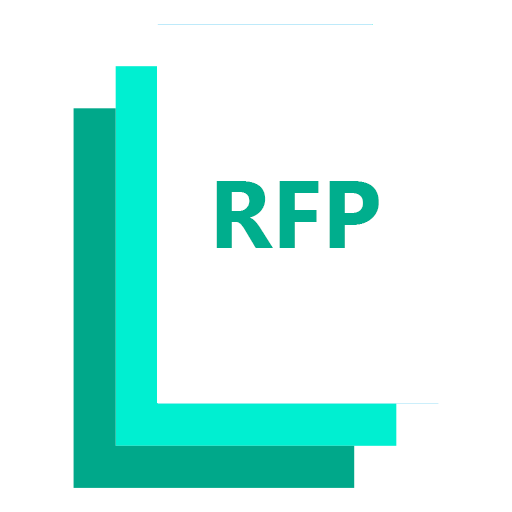
<style>
.page{position:relative;width:512px;height:512px;background:#ffffff}
.page>*{position:absolute;margin:0}
.t1{font:96px "SegoeUI-Bold";color:#00ae8d}
</style>
<div class="page">
<p class="t1" style="left:216px;top:181px;width:163px;height:67px">RFP</p>
</div>
